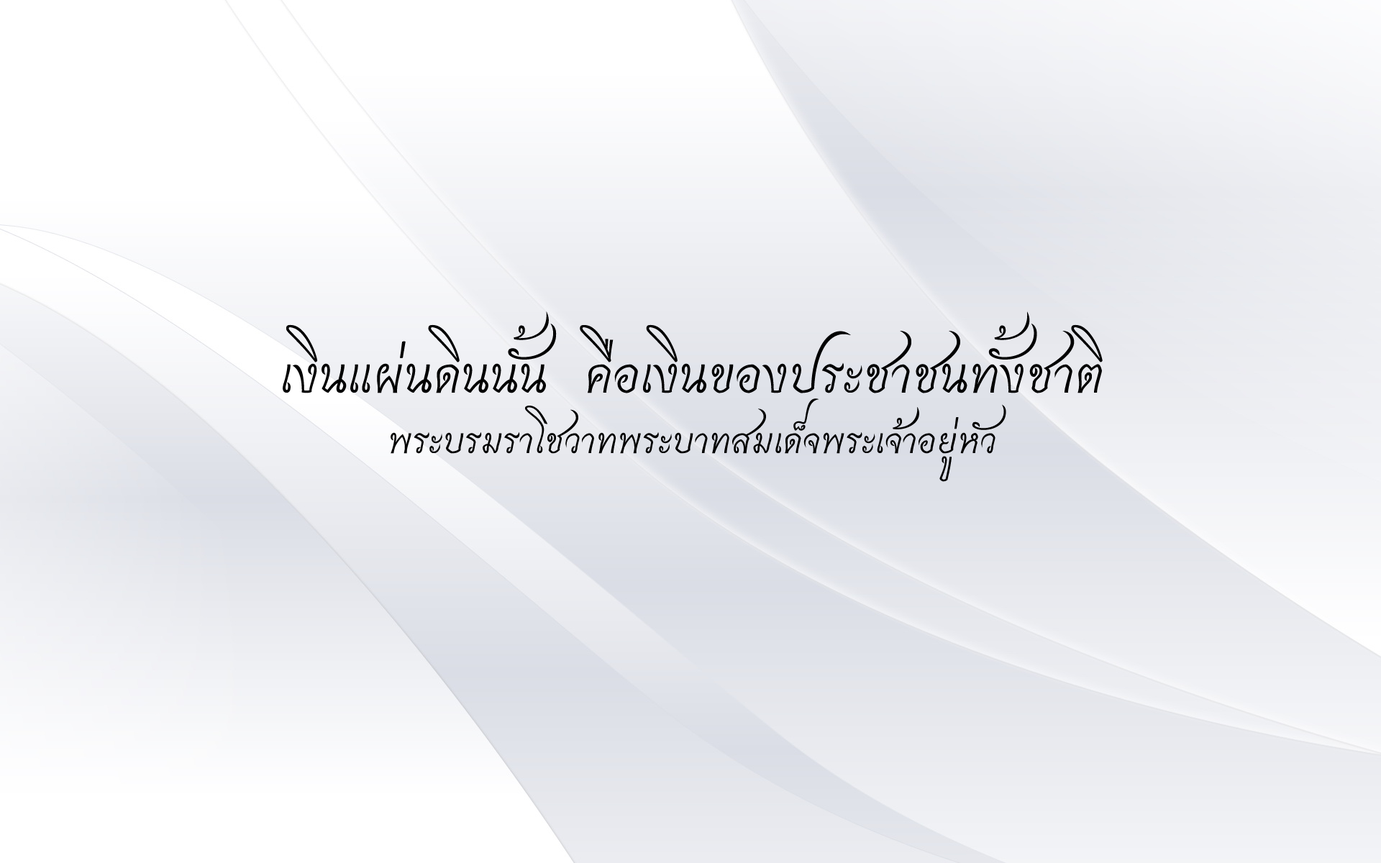
<style>
.page{position:relative;width:1381px;height:863px}
.page>*{position:absolute;margin:0}
.t1{font:71.9px "THCharmonman";color:#000000}
.t2{font:50.4px "THCharmonman";color:#000000}
</style>
<div class="page">
<p class="t1" style="left:283px;top:312px;width:820px;height:170px;text-align:center">เงินแผ่นดินนั้น  คือเงินของประชาชนทั้งชาติ<br><span class="t2">พระบรมราโชวาทพระบาทสมเด็จพระเจ้าอยู่หัว</span></p>
</div>
